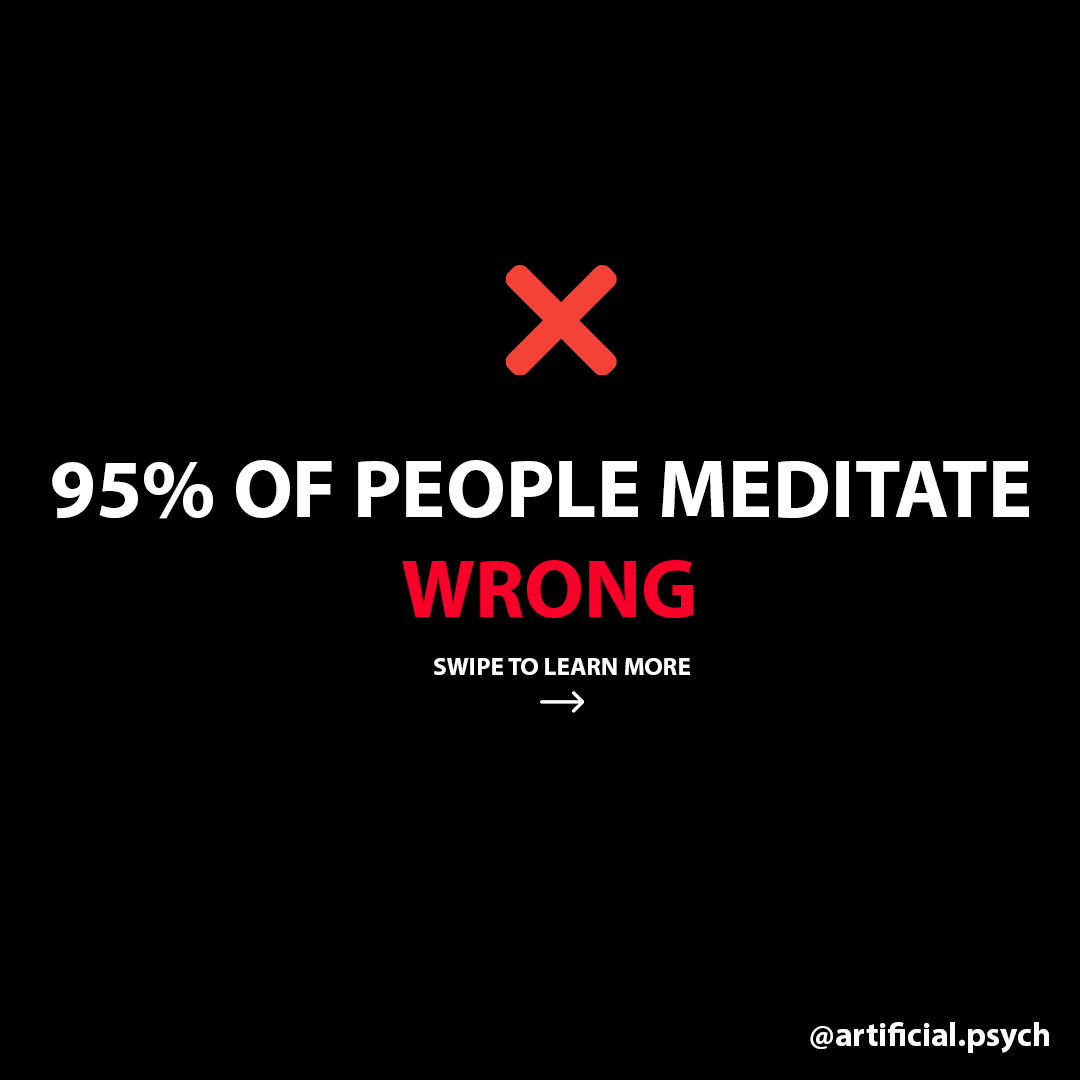
<style>
.page{position:relative;width:1080px;height:1080px;background:#000000}
.page>*{position:absolute;margin:0}
.t1{font:83.3px "MyriadPro-Bold";color:#ffffff}
.t2{font:83.3px "MyriadPro-Bold";color:#f80029}
.t3{font:25px "MyriadPro-Bold";color:#ffffff}
.t4{font:33.3px "MyriadPro-Bold";color:#ffffff}
</style>
<div class="page">
<p class="t1" style="left:52px;top:460px;width:977px;height:158px;text-align:center">95% OF PEOPLE MEDITATE <br><span class="t2">WRONG</span></p>
<p class="t3" style="left:434px;top:658px;width:256px;height:17px">SWIPE TO LEARN MORE</p>
<p class="t4" style="left:810px;top:1022px;width:239px;height:31px">@artificial.psych</p>
</div>
